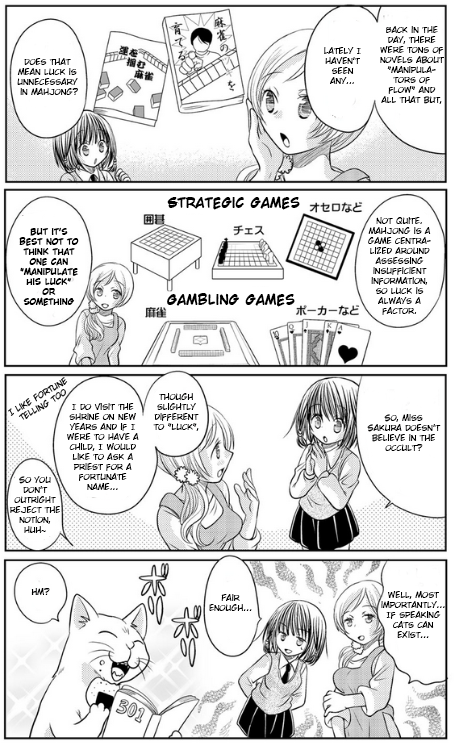
<style>
.page{position:relative;width:454px;height:744px;background:#ffffff}
.page>*{position:absolute;margin:0}
.t1{font:8.3px "WildWordsRoman";color:#000000}
.t2{font:13.3px "Wild-Words-Bold-Bold";color:#000000}
.t3{font:8.3px "Wild-Words-Bold-Bold";color:#000000}
.t4{font:8.3px "TimesNewRomanPSMT";color:#000000}
</style>
<div class="page">
<p class="t1" style="left:380px;top:26px;width:64px;height:78px;text-align:center">Back in the day, there were tons of novels about "manipulators of flow" and all that but,</p>
<p class="t1" style="left:324px;top:47px;width:37px;height:37px;text-align:center">Lately I haven't seen any...</p>
<p class="t1" style="left:17px;top:58px;width:61px;height:37px;text-align:center">Does that mean luck is <br>unnecessary<br> in mahjong?</p>
<p class="t2" style="left:167px;top:196px;width:133px;height:14px">Strategic games</p>
<p class="t1" style="left:368px;top:217px;width:63px;height:98px;text-align:center">Not quite. Mahjong is a game centralized around assessing insufficient information, so luck is always a factor.</p>
<p class="t3" style="left:19px;top:227px;width:60px;height:79px;text-align:center">But it's best not to think that one can <br>"manipulate his luck" or something like that.</p>
<p class="t2" style="left:167px;top:293px;width:128px;height:14px">Gambling games</p>
<p class="t1" style="left:8px;top:377px;width:60px;height:43px;rotate:-31deg">I like fortune telling too</p>
<p class="t1" style="left:153px;top:393px;width:46px;height:38px;text-align:center">Though slightly different to "luck",</p>
<p class="t1" style="left:67px;top:403px;width:72px;height:87px;text-align:center">I do visit the shrine on new years and if I were to have a child, I would like to ask a priest for a fortunate name...</p>
<p class="t1" style="left:367px;top:414px;width:74px;height:37px;text-align:center">So, Miss Sakura doesn't believe in the occult?</p>
<p class="t1" style="left:9px;top:476px;width:51px;height:57px;text-align:center">So you don't outright reject the notion, huh<span class="t4">~</span></p>
<p class="t1" style="left:31px;top:588px;width:19px;height:7px">Hm?</p>
<p class="t1" style="left:381px;top:591px;width:64px;height:47px;text-align:center">Well, most importantly...<br>If speaking cats can exist...</p>
<p class="t1" style="left:209px;top:594px;width:43px;height:17px;text-align:center">Fair enough...</p>
</div>
